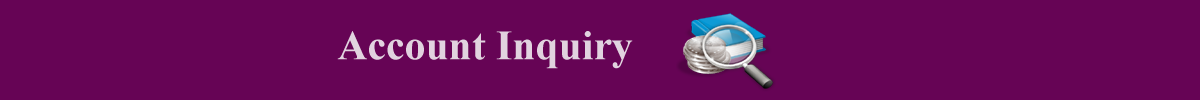
<style>
.page{position:relative;width:1200px;height:100px;background:#660455}
.page>*{position:absolute;margin:0}
.t1{font:41.7px "TimesNewRomanPS-BoldMT";color:#e1d3df}
</style>
<div class="page">
<p class="t1" style="left:337px;top:31px;width:296px;height:38px">Account Inquiry</p>
</div>
